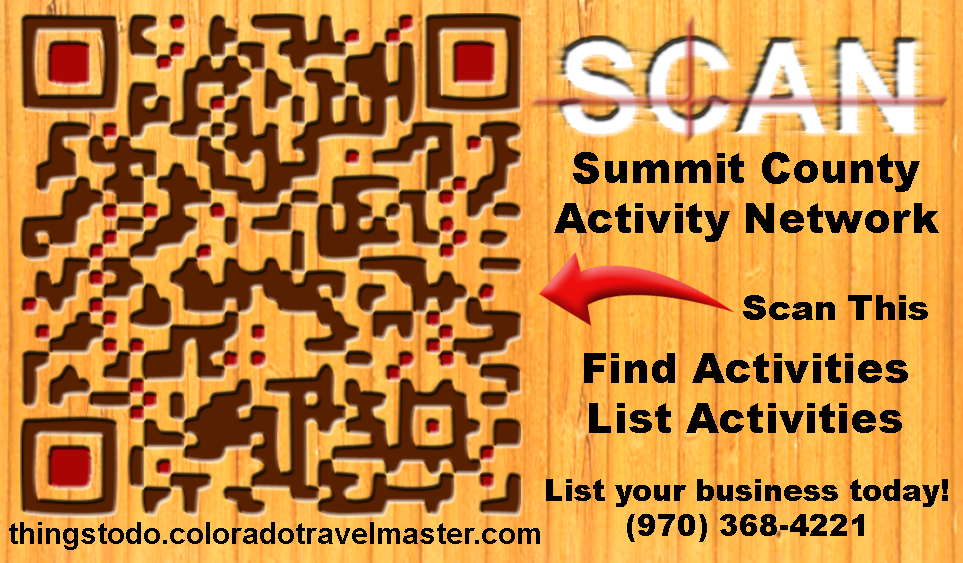
<style>
.page{position:relative;width:963px;height:563px}
.page>*{position:absolute;margin:0}
.t1{font:41.7px "Arial-Black";color:#000000}
.t2{font:33.3px "Arial-Black";color:#000000}
.t3{font:29.2px "Arial-Black";color:#000000}
.t4{font:29.2px "Arial-BoldMT";color:#000000}
</style>
<div class="page">
<p class="t1" style="left:554px;top:152px;width:385px;height:90px;text-align:center">Summit County<br>Activity Network</p>
<p class="t2" style="left:743px;top:295px;width:185px;height:25px">Scan This</p>
<p class="t1" style="left:584px;top:353px;width:324px;height:80px;text-align:center">Find Activities<br>List Activities</p>
<p class="t3" style="left:546px;top:479px;width:402px;height:63px;text-align:center">List your business today!<br>(970) 368-4221</p>
<p class="t4" style="left:9px;top:522px;width:531px;height:28px">thingstodo.coloradotravelmaster.com</p>
</div>
